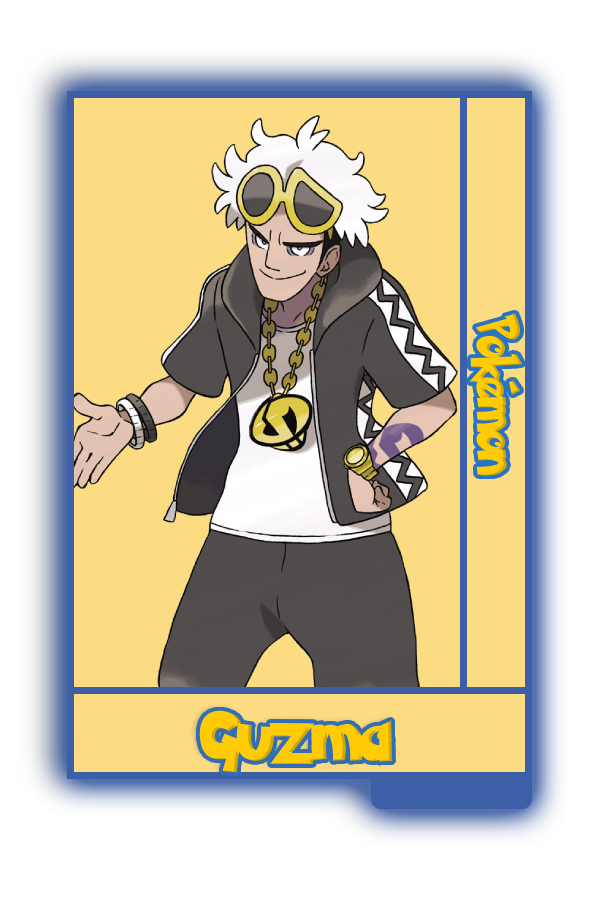
<style>
.page{position:relative;width:600px;height:900px;background:#fbdc83}
.page>*{position:absolute;margin:0}
.t1{font:48.8px "PokemonSolidNormal";color:#ffcb05;scale:0.8 1}
.t2{font:60.1px "PokemonSolidNormal";color:#ffcb05;scale:0.96 1}
</style>
<div class="page">
<p class="t1" style="left:469px;top:313px;width:54px;height:163px;rotate:90deg">Pokémon</p>
<p class="t2" style="left:199px;top:710px;width:193px;height:63px">Guzma</p>
</div>
